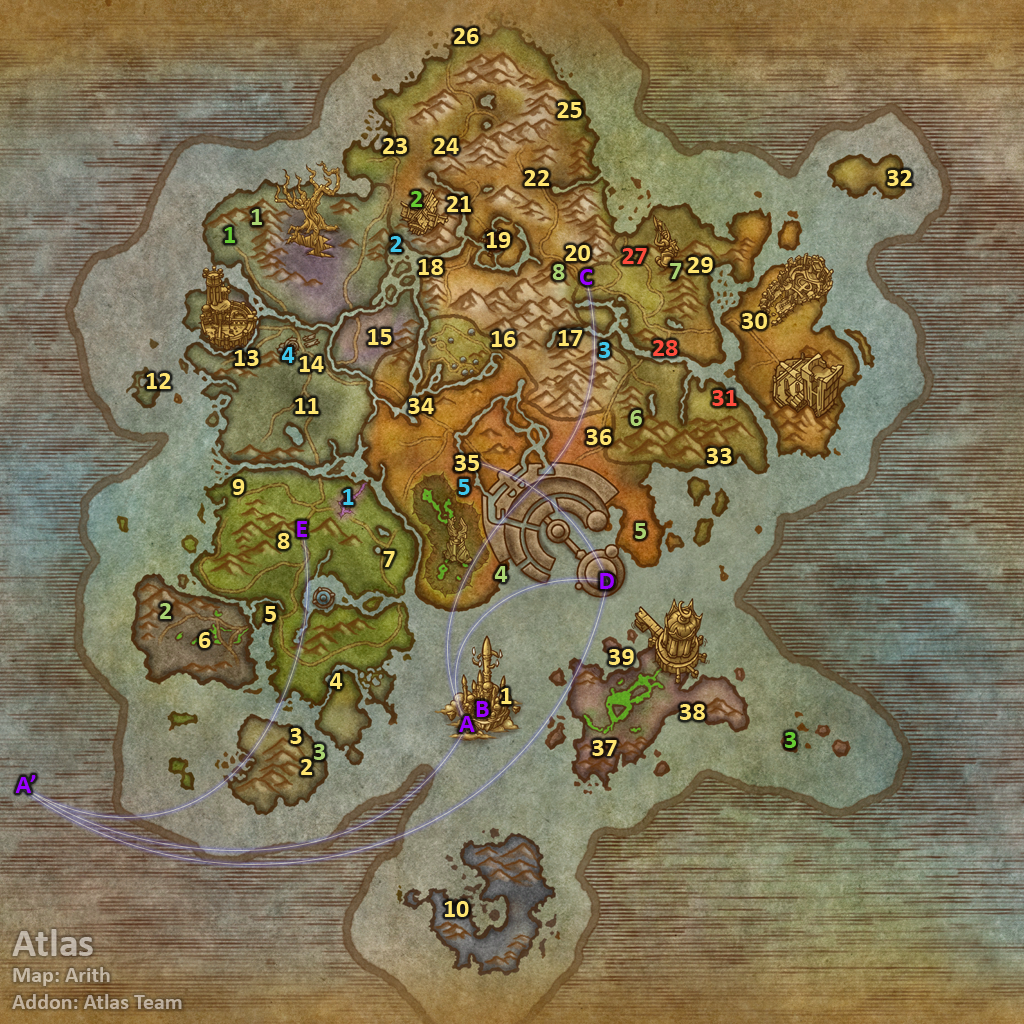
<style>
.page{position:relative;width:1024px;height:1024px}
.page>*{position:absolute;margin:0}
.t1{font:26px "Calibri-Bold";color:#fee570}
.t2{font:26px "Calibri-Bold";color:#66cc33}
.t3{font:26px "Calibri-Bold";color:#abd473}
.t4{font:26px "Calibri-Bold";color:#3fc7eb}
.t5{font:26px "Calibri-Bold";color:#ff4c3c}
.t6{font:26px "Calibri-Bold";color:#9900ff}
.t7{font:22px "Calibri-Bold";color:#c1b4a3}
.t8{font:40px "Calibri-Bold";color:#c1b4a3}
</style>
<div class="page">
<p class="t1" style="left:454px;top:28px;width:25px;height:16px">26</p>
<p class="t1" style="left:557px;top:102px;width:25px;height:16px">25</p>
<p class="t1" style="left:383px;top:138px;width:24px;height:16px">23</p>
<p class="t1" style="left:434px;top:138px;width:25px;height:16px">24</p>
<p class="t1" style="left:524px;top:170px;width:26px;height:16px">22</p>
<p class="t1" style="left:887px;top:170px;width:25px;height:16px">32</p>
<p class="t2" style="left:411px;top:191px;width:12px;height:16px">2</p>
<p class="t1" style="left:447px;top:196px;width:24px;height:16px">21</p>
<p class="t3" style="left:251px;top:209px;width:11px;height:16px">1</p>
<p class="t2" style="left:224px;top:227px;width:11px;height:16px">1</p>
<p class="t1" style="left:486px;top:232px;width:25px;height:16px">19</p>
<p class="t4" style="left:390px;top:236px;width:12px;height:16px">2</p>
<p class="t1" style="left:565px;top:245px;width:25px;height:16px">20</p>
<p class="t5" style="left:622px;top:248px;width:25px;height:16px">27</p>
<p class="t1" style="left:688px;top:257px;width:25px;height:16px">29</p>
<p class="t1" style="left:418px;top:259px;width:25px;height:16px">18</p>
<p class="t3" style="left:552px;top:264px;width:13px;height:16px">8</p>
<p class="t6" style="left:580px;top:269px;width:13px;height:16px">C</p>
<p class="t3" style="left:670px;top:263px;width:12px;height:16px">7</p>
<p class="t1" style="left:742px;top:313px;width:25px;height:16px">30</p>
<p class="t1" style="left:368px;top:329px;width:24px;height:16px">15</p>
<p class="t1" style="left:491px;top:331px;width:25px;height:16px">16</p>
<p class="t1" style="left:558px;top:330px;width:25px;height:16px">17</p>
<p class="t4" style="left:599px;top:342px;width:11px;height:16px">3</p>
<p class="t5" style="left:653px;top:340px;width:25px;height:16px">28</p>
<p class="t1" style="left:234px;top:350px;width:25px;height:16px">13</p>
<p class="t4" style="left:281px;top:347px;width:14px;height:16px">4</p>
<p class="t1" style="left:299px;top:356px;width:25px;height:16px">14</p>
<p class="t1" style="left:146px;top:373px;width:25px;height:16px">12</p>
<p class="t5" style="left:712px;top:390px;width:25px;height:16px">31</p>
<p class="t1" style="left:295px;top:398px;width:24px;height:16px">11</p>
<p class="t1" style="left:408px;top:398px;width:26px;height:16px">34</p>
<p class="t3" style="left:630px;top:410px;width:12px;height:16px">6</p>
<p class="t1" style="left:586px;top:429px;width:26px;height:16px">36</p>
<p class="t1" style="left:707px;top:448px;width:25px;height:16px">33</p>
<p class="t1" style="left:455px;top:455px;width:24px;height:16px">35</p>
<p class="t1" style="left:232px;top:479px;width:13px;height:16px">9</p>
<p class="t4" style="left:458px;top:479px;width:12px;height:16px">5</p>
<p class="t4" style="left:343px;top:489px;width:11px;height:16px">1</p>
<p class="t6" style="left:297px;top:521px;width:10px;height:16px">E</p>
<p class="t1" style="left:277px;top:533px;width:13px;height:16px">8</p>
<p class="t3" style="left:635px;top:523px;width:11px;height:16px">5</p>
<p class="t1" style="left:383px;top:551px;width:12px;height:16px">7</p>
<p class="t3" style="left:494px;top:566px;width:14px;height:16px">4</p>
<p class="t6" style="left:600px;top:573px;width:14px;height:16px">D</p>
<p class="t3" style="left:160px;top:603px;width:12px;height:16px">2</p>
<p class="t1" style="left:265px;top:606px;width:11px;height:16px">5</p>
<p class="t1" style="left:199px;top:632px;width:12px;height:16px">6</p>
<p class="t1" style="left:609px;top:649px;width:25px;height:16px">39</p>
<p class="t1" style="left:329px;top:673px;width:14px;height:16px">4</p>
<p class="t1" style="left:501px;top:688px;width:11px;height:16px">1</p>
<p class="t6" style="left:476px;top:701px;width:13px;height:16px">B</p>
<p class="t1" style="left:680px;top:704px;width:25px;height:16px">38</p>
<p class="t6" style="left:459px;top:716px;width:16px;height:16px">A</p>
<p class="t1" style="left:290px;top:728px;width:12px;height:16px">3</p>
<p class="t2" style="left:785px;top:732px;width:11px;height:16px">3</p>
<p class="t3" style="left:314px;top:744px;width:11px;height:16px">3</p>
<p class="t1" style="left:592px;top:740px;width:25px;height:16px">37</p>
<p class="t1" style="left:301px;top:759px;width:12px;height:16px">2</p>
<p class="t6" style="left:15px;top:775px;width:21px;height:18px">A’</p>
<p class="t1" style="left:444px;top:901px;width:25px;height:16px">10</p>
<p class="t7" style="left:12px;top:929px;width:170px;height:80px"><span class="t8">Atlas<br></span>Map: Arith<br>Addon: Atlas Team</p>
</div>
